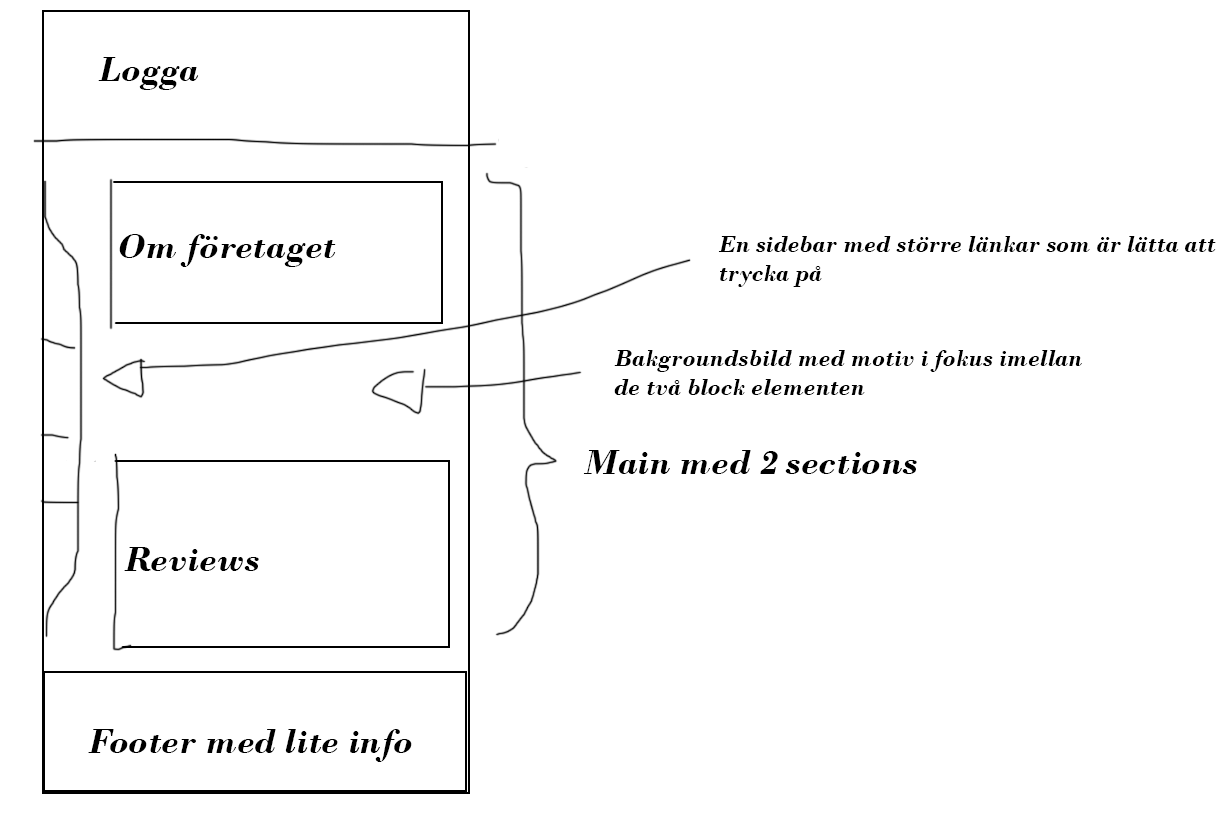
<style>
.page{position:relative;width:1224px;height:816px;background:#ffffff}
.page>*{position:absolute;margin:0}
.t1{font:36px "BodoniMT-BoldItalic";color:#000000}
.t2{font:24px "BodoniMT-BoldItalic";color:#000000}
</style>
<div class="page">
<p class="t1" style="left:98px;top:57px;width:101px;height:33px">Logga</p>
<p class="t1" style="left:119px;top:234px;width:217px;height:33px">Om företaget</p>
<p class="t2" style="left:718px;top:236px;width:498px;height:51px">En sidebar med större länkar som är lätta att<br>trycka på</p>
<p class="t2" style="left:614px;top:350px;width:468px;height:45px">Bakgroundsbild med motiv i fokus imellan<br>de två block elementen</p>
<p class="t1" style="left:583px;top:450px;width:334px;height:24px">Main med 2 sections</p>
<p class="t1" style="left:124px;top:547px;width:135px;height:24px">Reviews</p>
<p class="t1" style="left:88px;top:729px;width:324px;height:33px">Footer med lite info</p>
</div>
